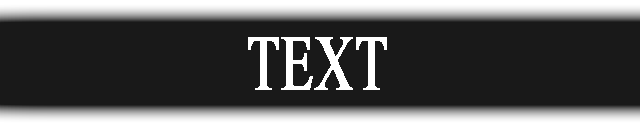
<style>
.page{position:relative;width:640px;height:128px;background:#191919}
.page>*{position:absolute;margin:0}
.t1{font:79.5px "TimesNewRomanPSMT";color:#ffffff;font-weight:bold;scale:0.67 1}
</style>
<div class="page">
<p class="t1" style="left:248px;top:37px;width:139px;height:53px">TEXT</p>
</div>
